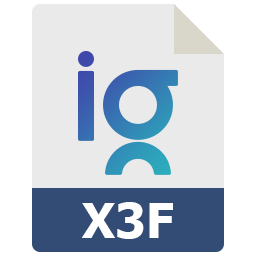
<style>
.page{position:relative;width:256px;height:256px;background:#eaeaea}
.page>*{position:absolute;margin:0}
.t1{font:48px "Tahoma-Bold";color:#ffffff}
</style>
<div class="page">
<p class="t1" style="left:82px;top:202px;width:91px;height:37px">X3F</p>
</div>
